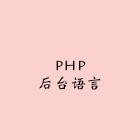
<style>
.page{position:relative;width:140px;height:140px;background:#fad1cf}
.page>*{position:absolute;margin:0}
.t1{font:16px "LithosPro-Regular";letter-spacing:0.01em;color:#000000}
.t2{font:12px "DFWeiBei-Md-80-Win-GB";letter-spacing:0.01em;color:#000000}
</style>
<div class="page">
<p class="t1" style="left:56px;top:60px;width:30px;height:11px">php</p>
<p class="t2" style="left:39px;top:76px;width:62px;height:14px">后台语言</p>
</div>
